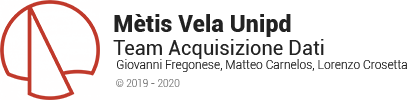
<style>
.page{position:relative;width:408px;height:100px;background:#ffffff}
.page>*{position:absolute;margin:0}
.t1{font:12px/13.7px "Roboto-Light";color:#222222}
.t2{font:23.4px/20.1px "Roboto-Black";color:#222222}
.t3{font:20.1px/23.4px "Roboto-Regular";color:#222222}
.t4{font:10px/18.4px "Roboto-Light";color:#777777}
</style>
<div class="page">
<p class="t1" style="left:113px;top:14px;width:294px;height:73px"><span class="t2">Mètis Vela Unipd<br></span><span class="t3">Team Acquisizione Dati<br></span> Giovanni Fregonese, Matteo Carnelos, Lorenzo Crosetta<br><span class="t4"> © 2019 - 2020</span></p>
</div>
